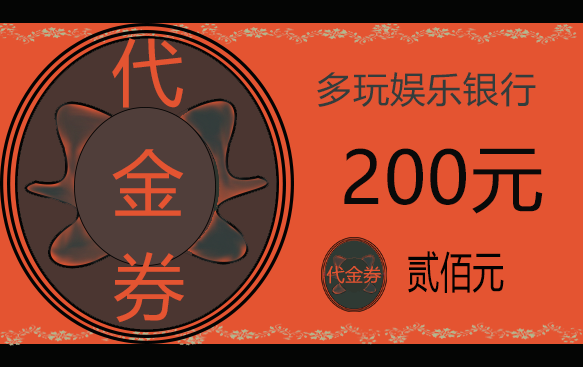
<style>
.page{position:relative;width:583px;height:367px;background:#e45431}
.page>*{position:absolute;margin:0}
.t1{font:72px "MicrosoftYaHei";letter-spacing:0.02em;color:#e45431}
.t2{font:36px "MicrosoftYaHei";letter-spacing:0.02em;color:#333d3c}
.t3{font:72px "MicrosoftYaHei";letter-spacing:0.02em;color:#090a0a}
.t4{font:43.1px "MicrosoftYaHei";letter-spacing:0.02em;color:#020202;scale:0.74 1}
.t5{font:18px "MicrosoftYaHei";letter-spacing:0.02em;color:#e45431}
</style>
<div class="page">
<p class="t1" style="left:112px;top:38px;width:71px;height:70px">代</p>
<p class="t2" style="left:317px;top:72px;width:219px;height:35px">多玩娱乐银行</p>
<p class="t1" style="left:112px;top:149px;width:72px;height:67px">金</p>
<p class="t3" style="left:344px;top:148px;width:199px;height:66px">200元</p>
<p class="t1" style="left:114px;top:252px;width:70px;height:71px">券</p>
<p class="t4" style="left:408px;top:251px;width:96px;height:42px">贰佰元</p>
<p class="t5" style="left:326px;top:266px;width:55px;height:18px">代金券</p>
</div>
